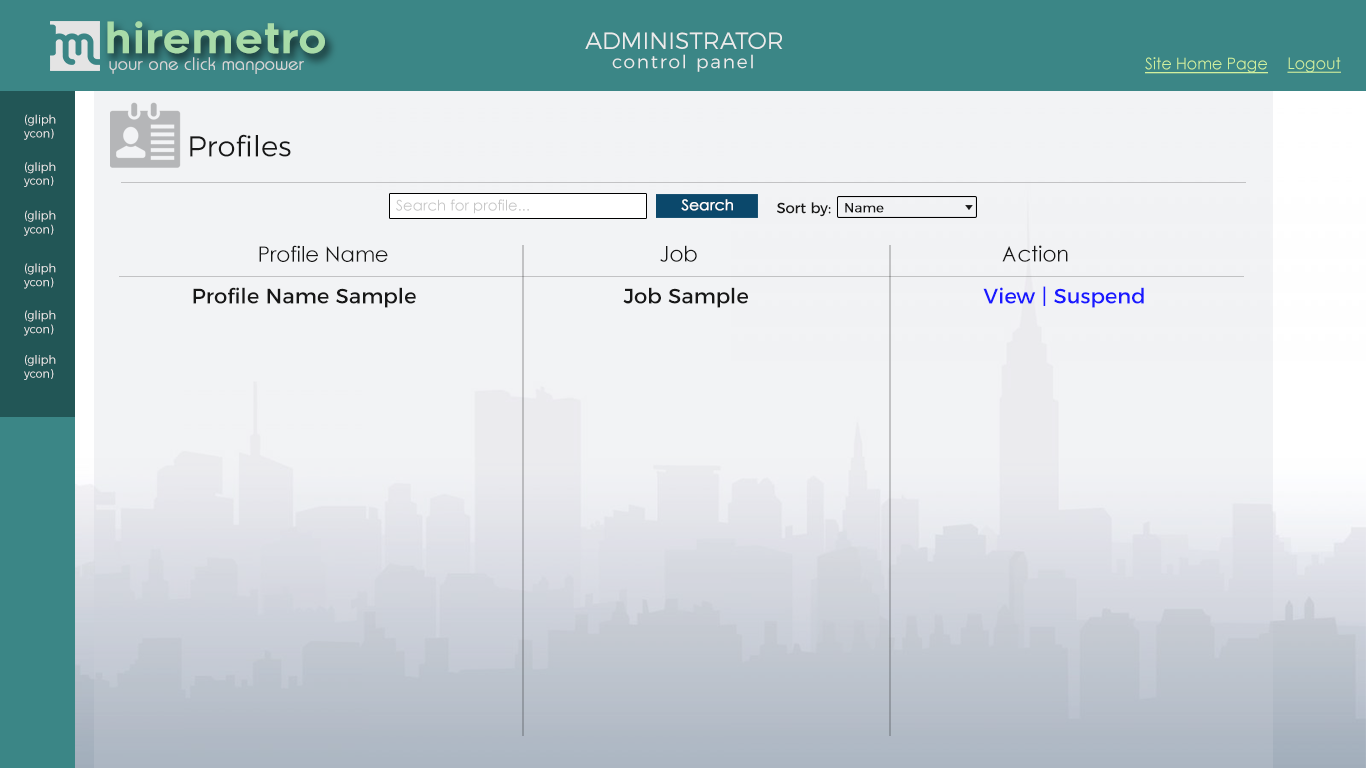
<style>
.page{position:relative;width:1366px;height:768px;background:#f2f3f5}
.page>*{position:absolute;margin:0}
.t1{font:42.1px "Renogare-Regular";color:#a8dba8}
.t2{font:23.6px "Montserrat-Light";color:#ebebeb}
.t3{font:18.4px "Montserrat-Light";letter-spacing:0.1em;color:#ebebeb}
.t4{font:17.5px "Brie-Light";color:#d5d5d5;font-weight:bold}
.t5{font:16.1px "CenturyGothic";color:#cff09e;text-decoration:underline}
.t6{font:11.5px "Montserrat-Light";color:#ebebeb}
.t7{font:28.9px "Montserrat-Light";color:#171717}
.t8{font:14.6px "CenturyGothic";color:#c6c6c6}
.t9{font:14.6px "CenturyGothic";color:#ffffff;font-weight:bold}
.t10{font:14.9px "Montserrat-Regular";color:#171717}
.t11{font:13.1px "Montserrat-Light";color:#171717;font-weight:bold}
.t12{font:21.2px "CenturyGothic";color:#171717}
.t13{font:21.4px "CenturyGothic";color:#171717}
.t14{font:21.2px "Montserrat-Regular";color:#171717}
.t15{font:21.2px "Montserrat-Regular";color:#1919ff}
</style>
<div class="page">
<p class="t1" style="left:107px;top:21px;width:218px;height:33px">hiremetro</p>
<p class="t2" style="left:585px;top:32px;width:198px;height:17px">ADMINISTRATOR</p>
<p class="t3" style="left:612px;top:54px;width:141px;height:18px">control panel</p>
<p class="t4" style="left:109px;top:57px;width:195px;height:17px">your one click manpower</p>
<p class="t5" style="left:1145px;top:57px;width:123px;height:17px">Site Home Page</p>
<p class="t5" style="left:1287px;top:57px;width:54px;height:16px">Logout</p>
<p class="t6" style="left:24px;top:114px;width:32px;height:26px">(gliph<br>ycon)</p>
<p class="t7" style="left:190px;top:134px;width:101px;height:23px">Profiles</p>
<p class="t6" style="left:24px;top:162px;width:32px;height:25px">(gliph<br>ycon)</p>
<p class="t8" style="left:396px;top:199px;width:133px;height:15px">Search for profile...</p>
<p class="t9" style="left:681px;top:199px;width:52px;height:12px">Search</p>
<p class="t10" style="left:777px;top:202px;width:54px;height:15px">Sort by:</p>
<p class="t11" style="left:845px;top:203px;width:39px;height:10px">Name</p>
<p class="t6" style="left:24px;top:210px;width:32px;height:26px">(gliph<br>ycon)</p>
<p class="t12" style="left:259px;top:245px;width:129px;height:17px">Profile Name</p>
<p class="t13" style="left:660px;top:245px;width:37px;height:17px">Job</p>
<p class="t13" style="left:1002px;top:245px;width:66px;height:17px">Action</p>
<p class="t6" style="left:24px;top:263px;width:32px;height:26px">(gliph<br>ycon)</p>
<p class="t14" style="left:193px;top:286px;width:951px;height:22px">Profile Name Sample      Job Sample       <span class="t15">View | Suspend</span></p>
<p class="t6" style="left:24px;top:310px;width:32px;height:26px">(gliph<br>ycon)</p>
<p class="t6" style="left:24px;top:355px;width:32px;height:25px">(gliph<br>ycon)</p>
</div>
